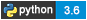
<style>
.page{position:relative;width:87px;height:20px;background:#363636}
.page>*{position:absolute;margin:0}
.t1{font:11px "ArialMT";letter-spacing:-0.01em;color:#ffffff;font-weight:bold}
</style>
<div class="page">
<p class="t1" style="left:19px;top:5px;width:34px;height:11px">python</p>
<p class="t1" style="left:64px;top:6px;width:16px;height:9px">3.6</p>
</div>
